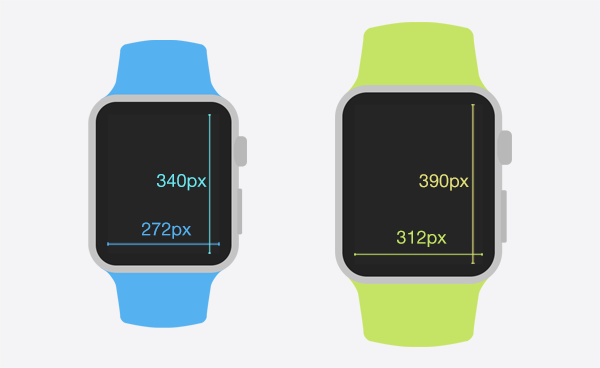
<style>
.page{position:relative;width:600px;height:368px;background:#f4f4f6}
.page>*{position:absolute;margin:0}
.t1{font:18px "HelveticaNeue";color:#6de8f0}
.t2{font:18px "HelveticaNeue";color:#e4e07c}
.t3{font:18px "HelveticaNeue";color:#55b1f0}
.t4{font:18px "HelveticaNeue";color:#c5e465}
</style>
<div class="page">
<p class="t1" style="left:157px;top:174px;width:50px;height:17px">340px</p>
<p class="t2" style="left:419px;top:174px;width:50px;height:17px">390px</p>
<p class="t3" style="left:142px;top:222px;width:50px;height:17px">272px</p>
<p class="t4" style="left:397px;top:230px;width:50px;height:17px">312px</p>
</div>
